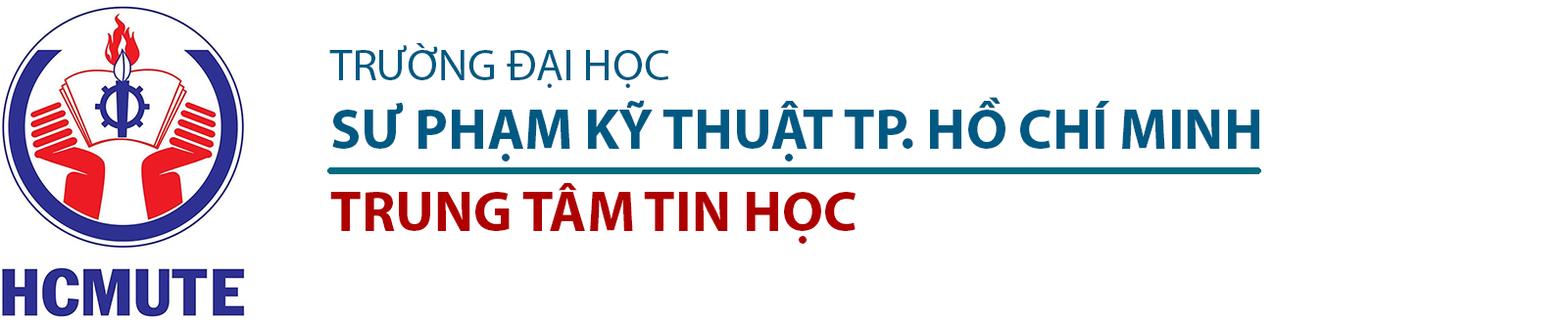
<style>
.page{position:relative;width:1568px;height:323px;background:#ffffff}
.page>*{position:absolute;margin:0}
.t1{font:57.2px "MyriadPro-Bold";color:#005982}
.t2{font:44.9px "MyriadPro-Regular";color:#005982}
.t3{font:57.2px "MyriadPro-Bold";color:#ae0000}
</style>
<div class="page">
<p class="t1" style="left:329px;top:43px;width:930px;height:119px"><span class="t2">TRƯỜNG ĐẠI HỌC<br></span>SƯ PHẠM KỸ THUẬT TP. HỒ CHÍ MINH</p>
<p class="t3" style="left:330px;top:183px;width:526px;height:61px">TRUNG TÂM TIN HỌC</p>
</div>
